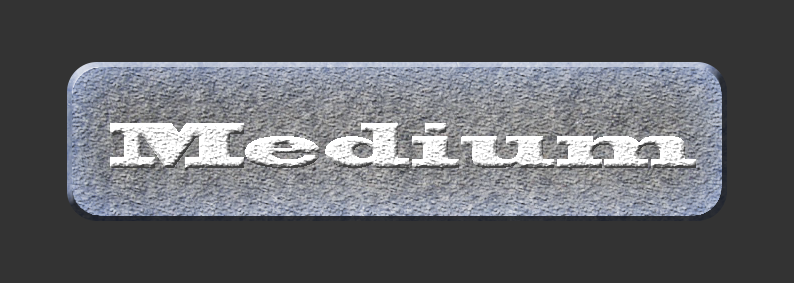
<style>
.page{position:relative;width:794px;height:283px;background:#333333}
.page>*{position:absolute;margin:0}
.t1{font:60px "BlackoakStd";color:#ffffff}
</style>
<div class="page">
<p class="t1" style="left:110px;top:123px;width:586px;height:45px">Medium</p>
</div>
